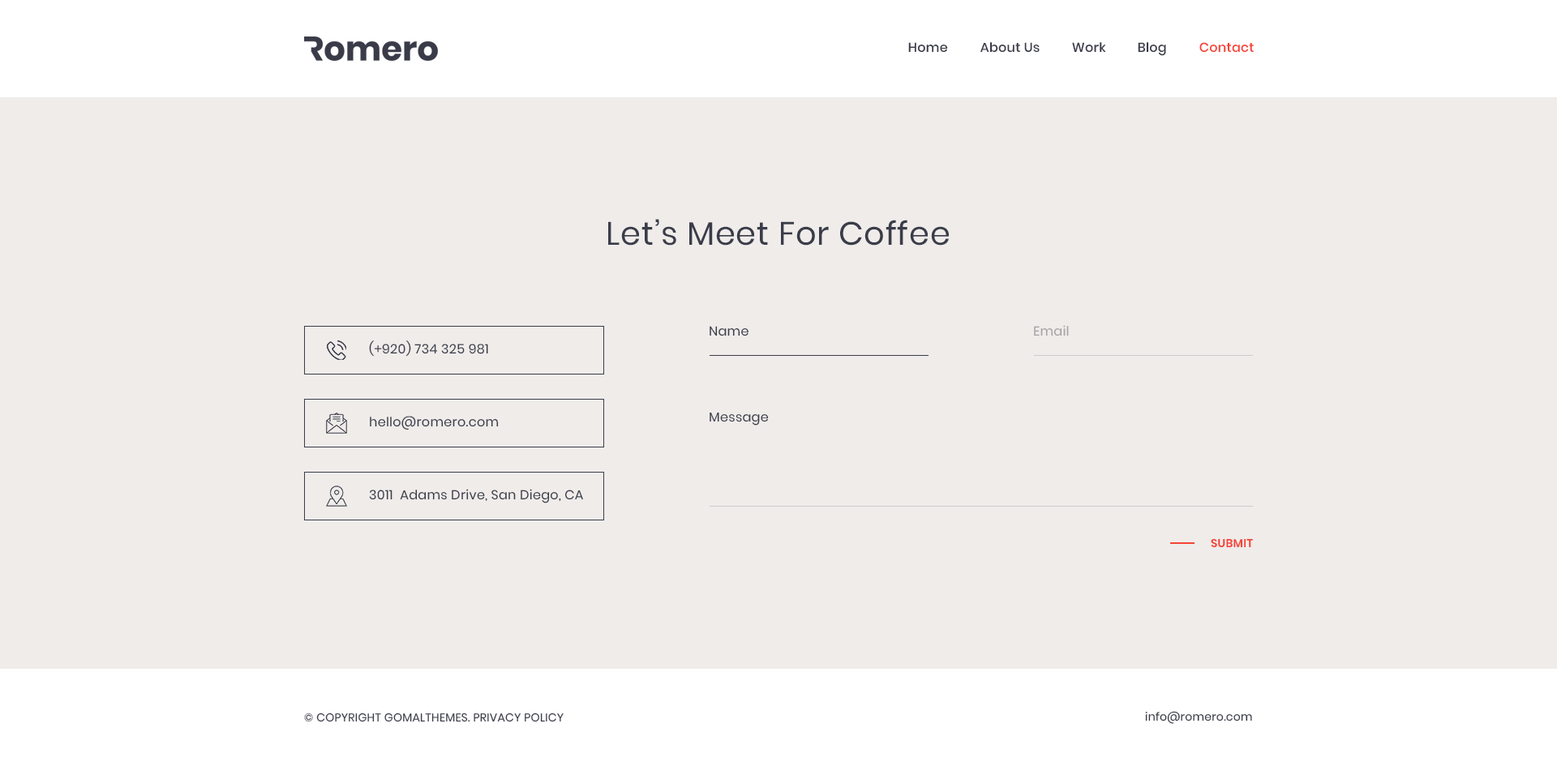
<style>
.page{position:relative;width:1557px;height:766px;background:#efecea}
.page>*{position:absolute;margin:0}
.t1{font:13px "Poppins-Medium";letter-spacing:0.02em;color:#3a3c49}
.t2{font:13px "Poppins-Medium";letter-spacing:0.02em;color:#f44336}
.t3{font:32.4px "Poppins-Regular";letter-spacing:0.02em;color:#3a3c49}
.t4{font:13px "Poppins-Regular";letter-spacing:0.02em;color:#3a3c49}
.t5{font:13px "Poppins-Regular";letter-spacing:0.02em;color:#a4a3a6}
.t6{font:11.3px "Poppins-SemiBold";letter-spacing:0.02em;color:#f44336}
.t7{font:11.3px "Poppins-Regular";letter-spacing:0.02em;color:#3a3c49}
</style>
<div class="page">
<p class="t1" style="left:908px;top:42px;width:40px;height:11px">Home</p>
<p class="t1" style="left:980px;top:42px;width:59px;height:11px">About Us</p>
<p class="t1" style="left:1072px;top:42px;width:34px;height:11px">Work</p>
<p class="t1" style="left:1137px;top:42px;width:29px;height:14px">Blog</p>
<p class="t2" style="left:1199px;top:42px;width:54px;height:11px">Contact</p>
<p class="t3" style="left:608px;top:219px;width:340px;height:27px">Let’s Meet For Coffee</p>
<p class="t4" style="left:709px;top:326px;width:39px;height:10px">Name</p>
<p class="t5" style="left:1034px;top:325px;width:34px;height:11px">Email</p>
<p class="t4" style="left:369px;top:340px;width:119px;height:17px">(+920) 734 325 981</p>
<p class="t4" style="left:709px;top:412px;width:60px;height:14px">Message</p>
<p class="t4" style="left:370px;top:416px;width:129px;height:14px">hello@romero.com</p>
<p class="t4" style="left:369px;top:489px;width:214px;height:14px">3011  Adams Drive, San Diego, CA</p>
<p class="t6" style="left:1210px;top:538px;width:43px;height:10px">SUBMIT</p>
<p class="t7" style="left:304px;top:713px;width:259px;height:9px">© COPYRIGHT GOMALTHEMES. PRIVACY POLICY</p>
<p class="t7" style="left:1145px;top:711px;width:107px;height:13px">info@romero.com</p>
</div>
